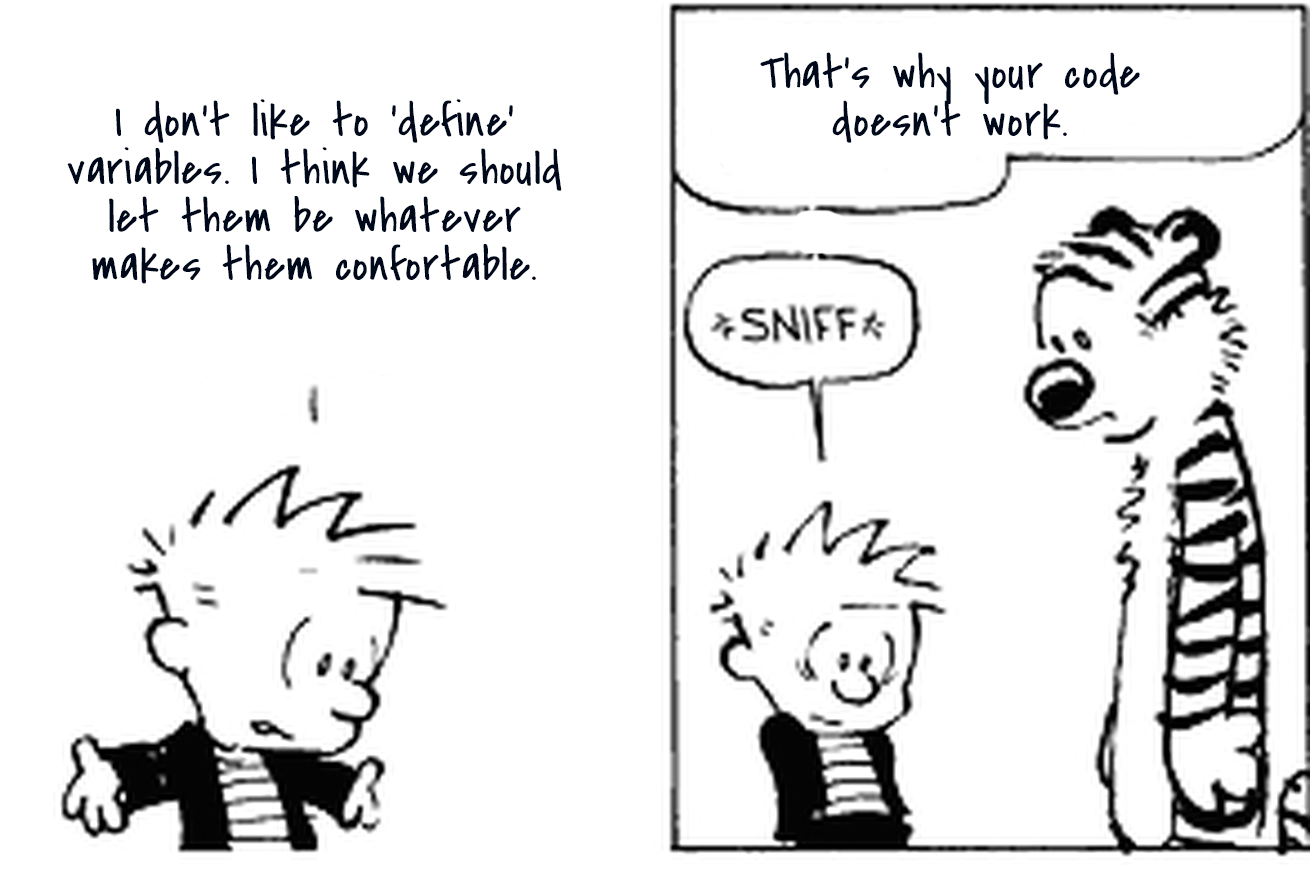
<style>
.page{position:relative;width:1310px;height:873px;background:#ffffff}
.page>*{position:absolute;margin:0}
.t1{font:48px/48px "CoveredByYourGrace";letter-spacing:0.025em;color:#00081b}
</style>
<div class="page">
<p class="t1" style="left:760px;top:52px;width:380px;height:91px;text-align:center">That’s why your code doesn’t work.</p>
<p class="t1" style="left:67px;top:99px;width:495px;height:185px;text-align:center">I don’t like to ‘define’ variables. I think we should let them be whatever makes them confortable.</p>
</div>
